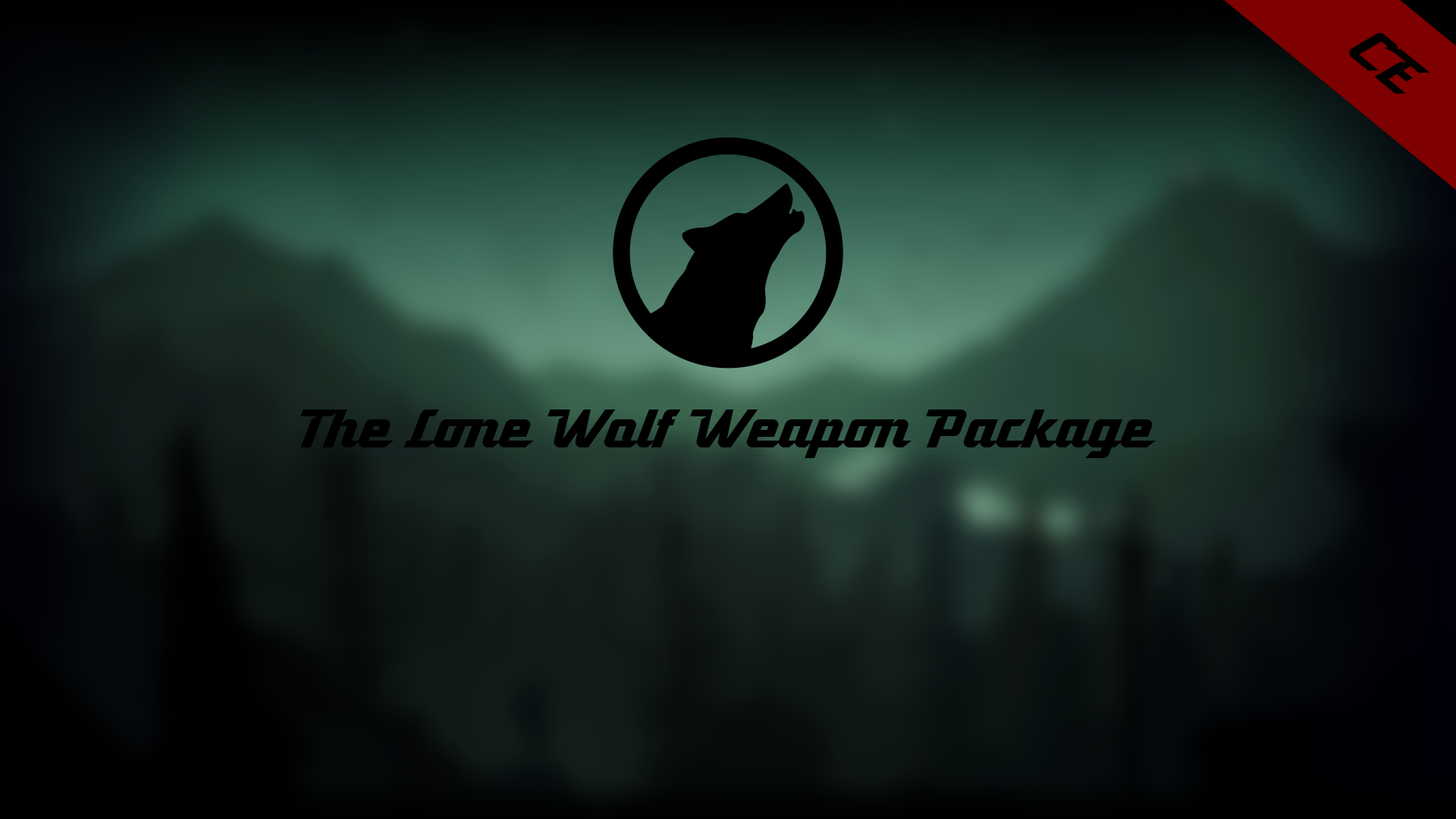
<style>
.page{position:relative;width:1456px;height:819px}
.page>*{position:absolute;margin:0}
.t1{font:54.6px "Atomicaboy-Regular";color:#000000}
</style>
<div class="page">
<p class="t1" style="left:1349px;top:33px;width:81px;height:61px;rotate:39deg">CE</p>
<p class="t1" style="left:300px;top:409px;width:856px;height:49px">The Lone Wolf Weapon Package</p>
</div>
